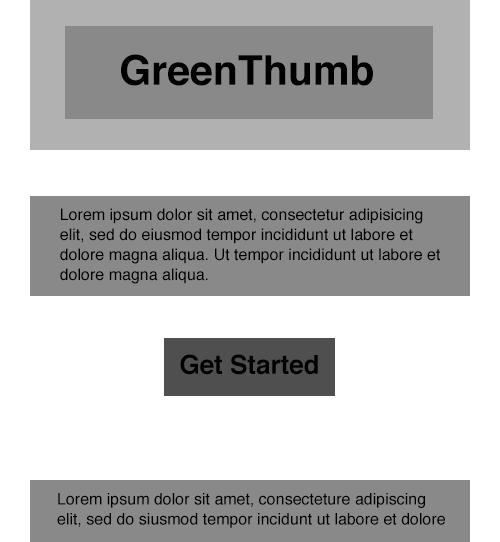
<style>
.page{position:relative;width:500px;height:542px;background:#ffffff}
.page>*{position:absolute;margin:0}
.t1{font:41px "Helvetica-Bold";color:#000000}
.t2{font:16px/20px "Helvetica";color:#000000}
.t3{font:26px "Helvetica-Bold";color:#000000}
</style>
<div class="page">
<p class="t1" style="left:121px;top:54px;width:252px;height:32px">GreenThumb</p>
<p class="t2" style="left:60px;top:208px;width:380px;height:76px">Lorem ipsum dolor sit amet, consectetur adipisicing elit, sed do eiusmod tempor incididunt ut labore et dolore magna aliqua. Ut tempor incididunt ut labore et dolore magna aliqua.</p>
<p class="t3" style="left:180px;top:354px;width:138px;height:21px">Get Started</p>
<p class="t2" style="left:57px;top:493px;width:388px;height:35px">Lorem ipsum dolor sit amet, consecteture adipiscing elit, sed do siusmod tempor incidunt ut labore et dolore magna aliqua.</p>
</div>
